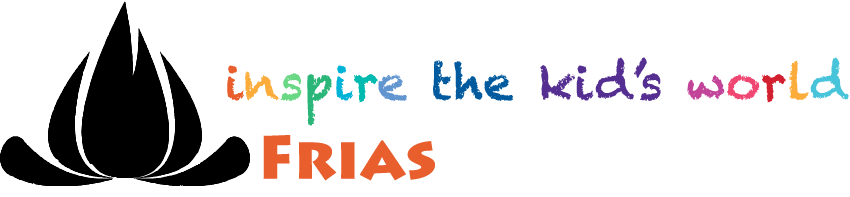
<style>
.page{position:relative;width:850px;height:197px;background:#ffffff}
.page>*{position:absolute;margin:0}
.t1{font:48px "Chalkduster";color:#542e91}
.t2{font:48px "Chalkduster";color:#e85e2d}
.t3{font:48px "Chalkduster";color:#fbac3a}
.t4{font:48px "Chalkduster";color:#6ad785}
.t5{font:48px "Chalkduster";color:#2ab678}
.t6{font:48px "Chalkduster";color:#00b3d7}
.t7{font:48px "Chalkduster";color:#00b9af}
.t8{font:48px "Chalkduster";color:#6195cf}
.t9{font:48px "Chalkduster";color:#005a9d}
.t10{font:48px "Chalkduster";color:#c14499}
.t11{font:48px "Chalkduster";color:#ef4771}
.t12{font:48px "Chalkduster";color:#d32031}
.t13{font:48px "Chalkduster";color:#47c4d9}
.t14{font:60px "LithosPro-Black";color:#e85e2d}
</style>
<div class="page">
<p class="t1" style="left:227px;top:57px;width:622px;height:69px"><span class="t2">i</span><span class="t3">n</span><span class="t4">s</span><span class="t5">p</span><span class="t6">i</span><span class="t7">r</span><span class="t8">e </span><span class="t9">the </span>kid’s <span class="t10">w</span><span class="t11">o</span><span class="t12">r</span><span class="t3">l</span><span class="t13">d</span></p>
<p class="t14" style="left:263px;top:135px;width:172px;height:46px">Frias</p>
</div>
